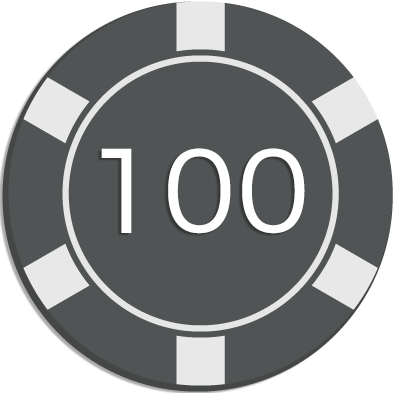
<style>
.page{position:relative;width:393px;height:393px;background:#515454}
.page>*{position:absolute;margin:0}
.t1{font:120px "Montserrat-Light";color:#ffffff}
</style>
<div class="page">
<p class="t1" style="left:101px;top:148px;width:204px;height:86px">100</p>
</div>
